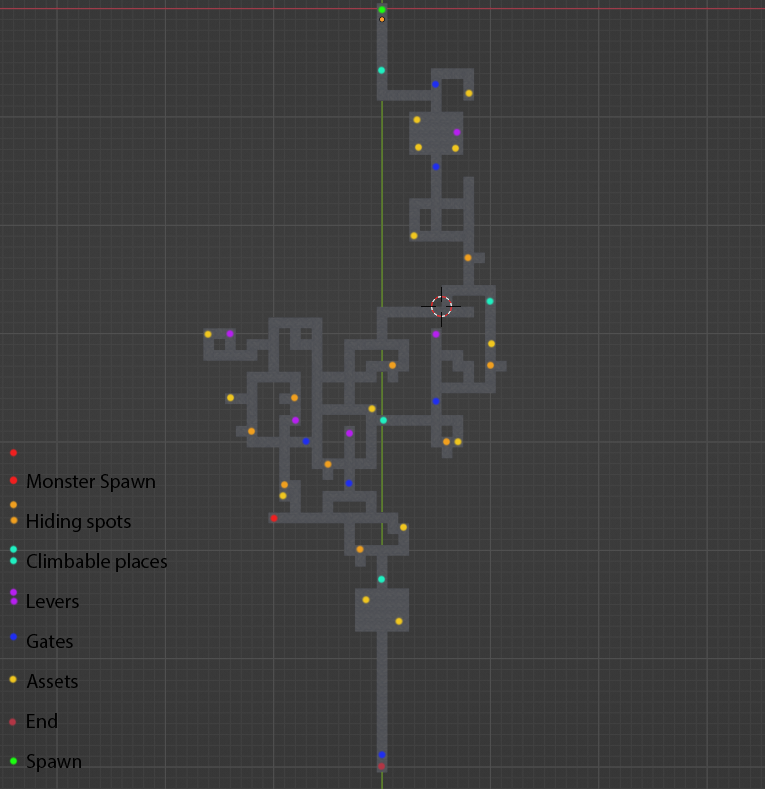
<style>
.page{position:relative;width:765px;height:789px}
.page>*{position:absolute;margin:0}
.t1{font:20px "MyriadPro-Regular";color:#000000}
</style>
<div class="page">
<p class="t1" style="left:27px;top:474px;width:128px;height:18px">Monster Spawn</p>
<p class="t1" style="left:27px;top:513px;width:104px;height:19px">Hiding spots</p>
<p class="t1" style="left:27px;top:553px;width:140px;height:19px">Climbable places</p>
<p class="t1" style="left:27px;top:594px;width:52px;height:14px">Levers</p>
<p class="t1" style="left:27px;top:634px;width:46px;height:14px">Gates</p>
<p class="t1" style="left:26px;top:674px;width:52px;height:14px">Assets</p>
<p class="t1" style="left:27px;top:713px;width:30px;height:15px">End</p>
<p class="t1" style="left:27px;top:754px;width:54px;height:18px">Spawn</p>
</div>
